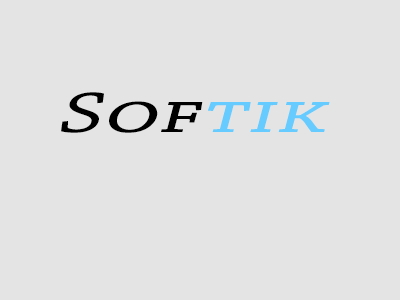
<style>
.page{position:relative;width:400px;height:300px;background:#e4e4e4}
.page>*{position:absolute;margin:0}
.t1{font:60px "ChaparralPro-Regular";letter-spacing:0.01em;color:#000000;font-variant:small-caps;font-style:italic;scale:1.5 1}
.t2{font:60px "Papyrus-Regular";letter-spacing:0.01em;color:#339999;font-variant:small-caps;font-style:italic;scale:1.5 1}
.t3{font:60px "ChaparralPro-Regular";letter-spacing:0.01em;color:#66ccff;font-variant:small-caps;font-style:italic;scale:1.5 1}
</style>
<div class="page">
<p class="t1" style="left:61px;top:92px;width:269px;height:41px"><span class="t2">         </span>Sof<span class="t3">tik</span></p>
</div>
